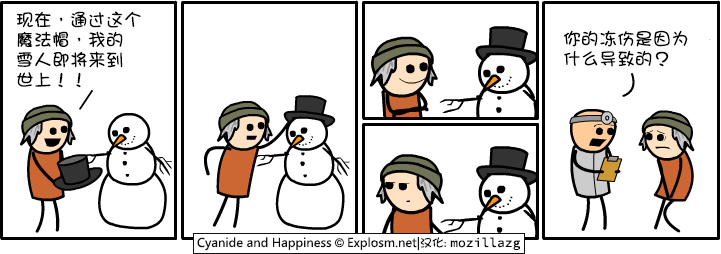
<style>
.page{position:relative;width:721px;height:254px;background:#ffffff}
.page>*{position:absolute;margin:0}
.t1{font:18px/20px "DFGirl";color:#000000}
</style>
<div class="page">
<p class="t1" style="left:16px;top:11px;width:125px;height:77px">现在，通过这个<br>魔法帽，我的<br>雪人即将来到<br>世上！！</p>
<p class="t1" style="left:563px;top:30px;width:125px;height:37px">你的冻伤是因为<br>什么导致的？</p>
</div>
